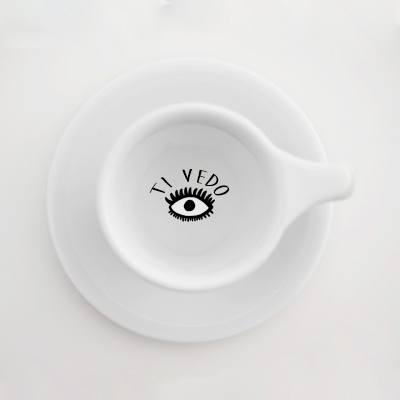
<style>
.page{position:relative;width:400px;height:400px}
.page>*{position:absolute;margin:0}
.t1{font:18px "MoonFlowerBold";color:#000000;scale:1.25 1}
</style>
<div class="page">
<p class="t1" style="left:149px;top:168px;width:81px;height:28px">ti vedo</p>
</div>
